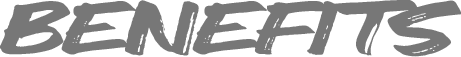
<style>
.page{position:relative;width:461px;height:57px;background:#777777}
.page>*{position:absolute;margin:0}
.t1{font:72.1px "NorthZone";color:#777777;scale:1.19 1}
</style>
<div class="page">
<p class="t1" style="left:0px;top:0px;width:462px;height:57px">BENEFITS</p>
</div>
